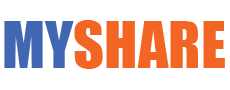
<style>
.page{position:relative;width:230px;height:90px;background:#ffffff}
.page>*{position:absolute;margin:0}
.t1{font:60px "Impact";color:#f26522}
.t2{font:60px "Impact";color:#4267b2}
</style>
<div class="page">
<p class="t1" style="left:4px;top:20px;width:221px;height:49px"><span class="t2">MY</span>SHARE</p>
</div>
